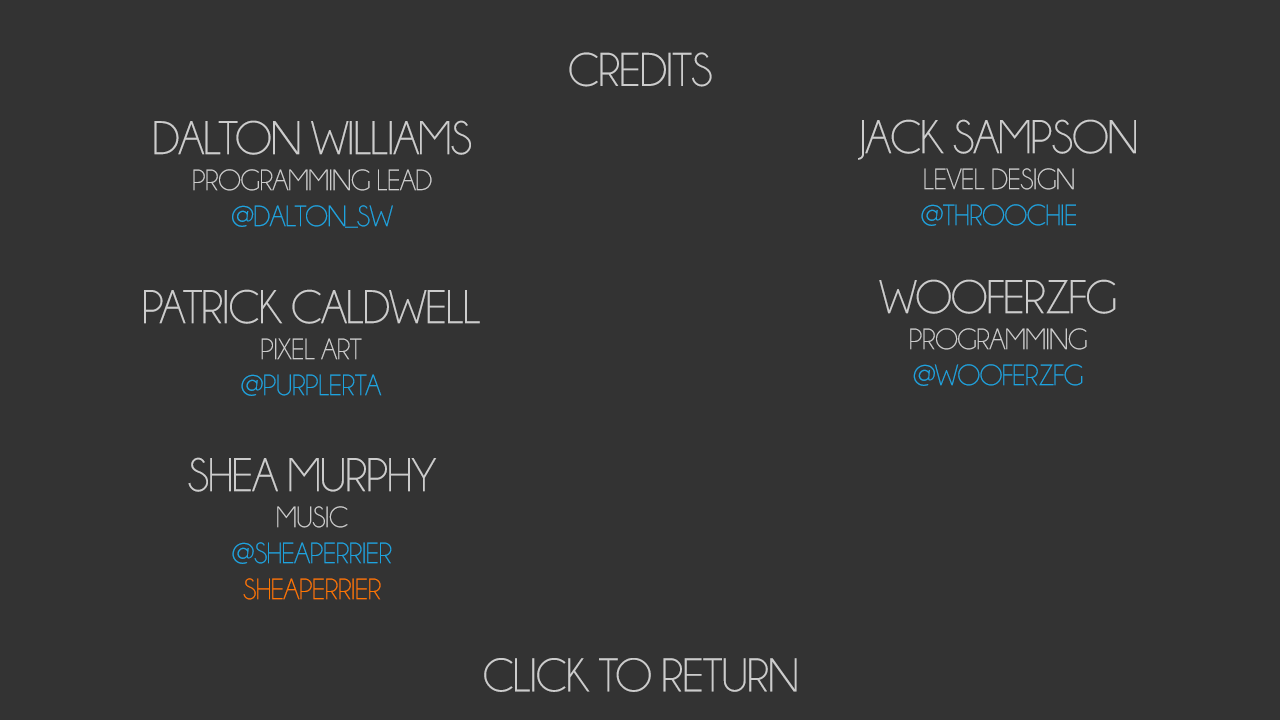
<style>
.page{position:relative;width:1280px;height:720px;background:#333333}
.page>*{position:absolute;margin:0}
.t1{font:48px "Champagne&Limousines";letter-spacing:-0.03em;color:#cccccc}
.t2{font:30px/36px "Champagne&Limousines";letter-spacing:-0.03em;color:#cccccc}
.t3{font:48px/36px "Champagne&Limousines";letter-spacing:-0.03em;color:#cccccc}
.t4{font:30px/36px "Champagne&Limousines";letter-spacing:-0.03em;color:#1da4de}
.t5{font:30px/36px "Champagne&Limousines";letter-spacing:-0.03em;color:#ff7700}
</style>
<div class="page">
<p class="t1" style="left:569px;top:52px;width:143px;height:35px">CREDITS</p>
<p class="t2" style="left:154px;top:120px;width:317px;height:108px;text-align:center"><span class="t3">DALTON WILLIAMS<br></span>PROGRAMMING LEAD<br><span class="t4">@DALTON_SW</span></p>
<p class="t3" style="left:858px;top:119px;width:278px;height:107px;text-align:center">JACK SAMPSON<br><span class="t2">LEVEL DESIGN<br></span><span class="t4">@THROOCHIE</span></p>
<p class="t2" style="left:879px;top:279px;width:237px;height:107px;text-align:center"><span class="t3">WOOFERZFG<br></span>PROGRAMMING<br><span class="t4">@WOOFERZFG</span></p>
<p class="t3" style="left:144px;top:289px;width:336px;height:107px;text-align:center">PATRICK CALDWELL<br><span class="t2">PIXEL ART<br></span><span class="t4">@PURPLERTA</span></p>
<p class="t4" style="left:188px;top:457px;width:249px;height:143px;text-align:center"><span class="t3">SHEA MURPHY<br></span><span class="t2">MUSIC<br></span>@SHEAPERRIER<br><span class="t5">SHEAPERRIER</span></p>
<p class="t1" style="left:484px;top:658px;width:313px;height:34px">CLICK TO RETURN</p>
</div>
